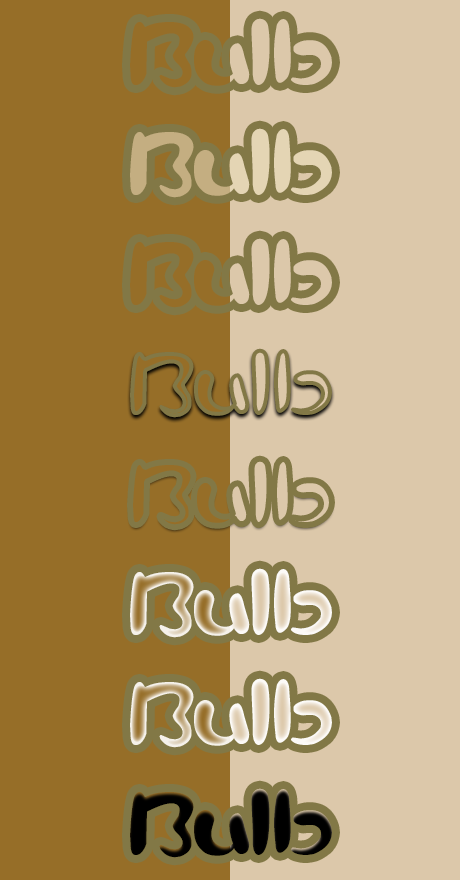
<style>
.page{position:relative;width:460px;height:880px;background:#dcc8aa}
.page>*{position:absolute;margin:0}
.t1{font:90px "Pikmin"}
.t2{font:90px "Pikmin";color:#000000}
</style>
<div class="page">
<p class="t1" style="left:130px;top:18px;width:202px;height:70px">Bulb</p>
<p class="t1" style="left:130px;top:128px;width:202px;height:70px">Bulb</p>
<p class="t1" style="left:130px;top:238px;width:202px;height:70px">Bulb</p>
<p class="t1" style="left:130px;top:568px;width:202px;height:70px">Bulb</p>
<p class="t2" style="left:130px;top:788px;width:202px;height:70px">Bulb</p>
</div>
